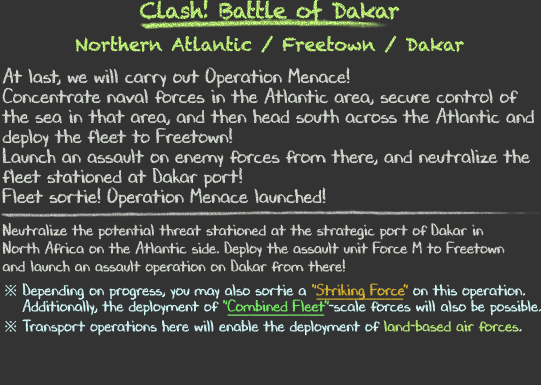
<style>
.page{position:relative;width:541px;height:385px;background:#333333}
.page>*{position:absolute;margin:0}
.t1{font:20px/20px "DJBChalkItUp";color:#d9ded6}
.t2{font:16px/18px "DJBChalkItUp";color:#d9ded6}
.t3{font:16px/24px "DJBChalkItUp";color:#d9ded6}
.t4{font:16px/16px "TimesNewRomanPSMT";color:#d7feff}
.t5{font:16px/16px "DJBChalkItUp";color:#d7feff}
.t6{font:16px/16px "DJBChalkItUp";color:#dfb731}
.t7{font:16px/16px "DJBChalkItUp";color:#dfb731;text-decoration:underline}
.t8{font:16px/20px "DJBChalkItUp";color:#d7feff}
.t9{font:16px/16px "DJBChalkItUp";color:#7bf26b}
.t10{font:16px/16px "DJBChalkItUp";color:#7bf26b;text-decoration:underline}
.t11{font:16px/16px "DJBChalkItUp";color:#bdef78}
</style>
<div class="page">
<p class="t1" style="left:1px;top:67px;width:540px;height:269px">At last, we will carry out Operation Menace!<br>Concentrate naval forces in the Atlantic area, secure control of<br>the sea in that area, and then head south across the Atlantic and<br>deploy the fleet to Freetown!<br>Launch an assault on enemy forces from there, and neutralize the<br>fleet stationed at Dakar port!<br>Fleet sortie! Operation Menace launched!<br><br><span class="t2">Neutralize the potential threat stationed at the strategic port of Dakar in<br>North Africa on the Atlantic side. Deploy the assault unit Force M to Freetown<br>and launch an assault operation on Dakar from there</span><span class="t3">!<br></span><span class="t4">※ </span><span class="t5">Depending on progress, you may also sortie a </span><span class="t6">"</span><span class="t7">Striking Force</span><span class="t6">"</span><span class="t5"> on this operation.<br>　 </span><span class="t8">Additionally, the deployment of </span><span class="t9">"</span><span class="t10">Combined Fleet</span><span class="t9">"</span><span class="t8">-scale forces will also be possible.<br></span><span class="t4">※ </span><span class="t5">Transport operations here will enable the deployment of </span><span class="t11">land-based air forces</span><span class="t5">.</span></p>
</div>
